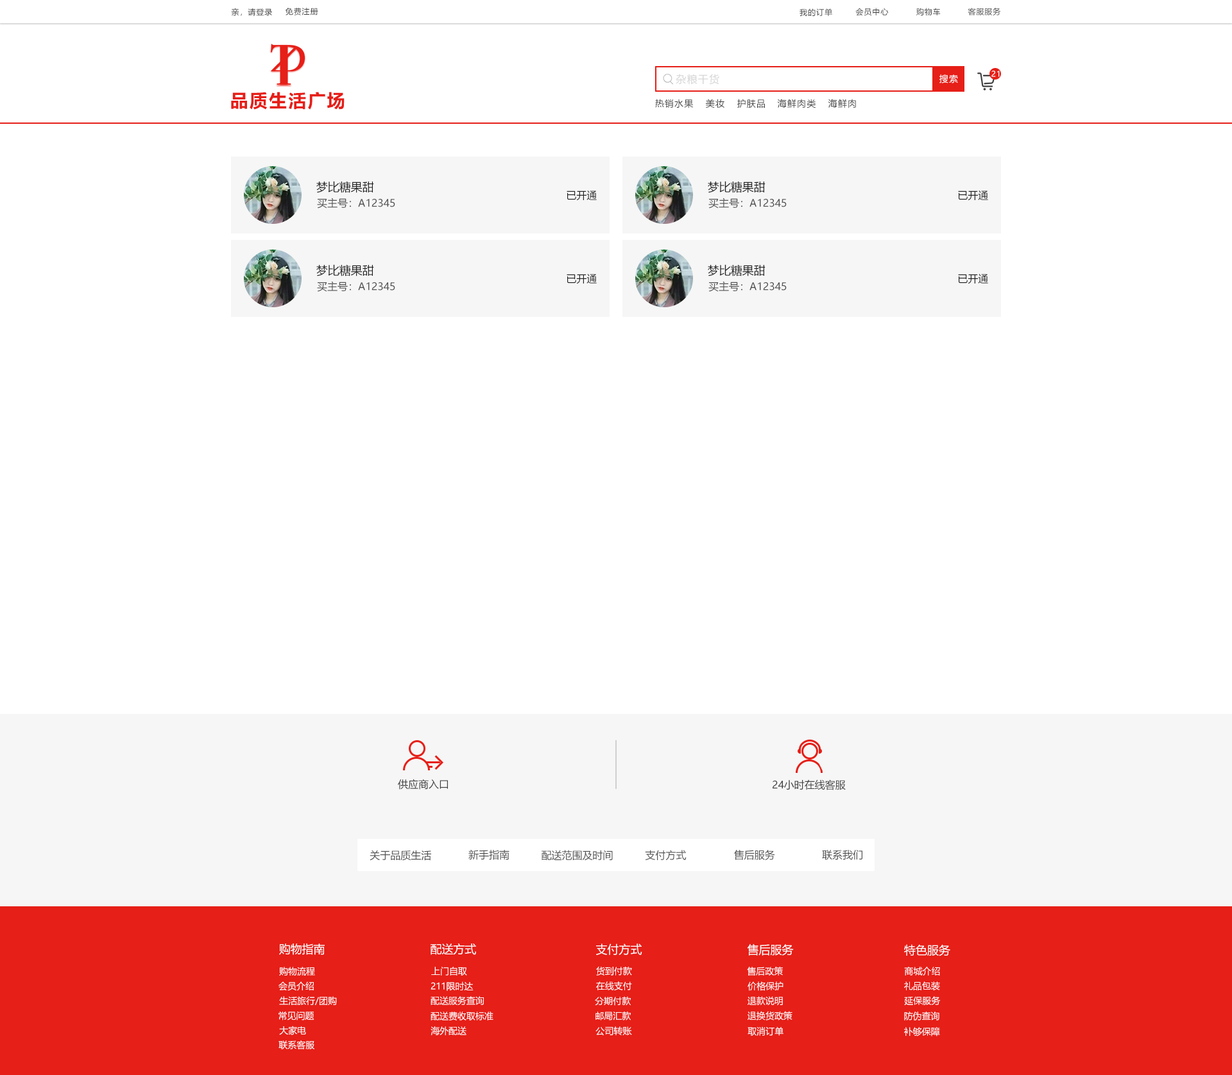
<style>
.page{position:relative;width:1232px;height:1075px;background:#ffffff}
.page>*{position:absolute;margin:0}
.t1{font:7.7px "MicrosoftYaHei";letter-spacing:0.08em;color:#404040}
.t2{font:10.3px "MicrosoftYaHei";letter-spacing:0.08em;color:#d6d6d6}
.t3{font:9px "MicrosoftYaHei";letter-spacing:0.08em;color:#ffffff}
.t4{font:7.7px "MicrosoftYaHei";letter-spacing:0.08em;color:#ffffff}
.t5{font:18px "MicrosoftYaHei-Bold";letter-spacing:0.08em;color:#e61f18}
.t6{font:9px "MicrosoftYaHei";letter-spacing:0.08em;color:#404040}
.t7{font:11.5px "MicrosoftYaHei";color:#202020}
.t8{font:10.3px "MicrosoftYaHei";color:#505050}
.t9{font:10.3px "MicrosoftYaHei";color:#202020}
.t10{font:10.3px "MicrosoftYaHei";color:#404040}
.t11{font:11.5px "MicrosoftYaHei";color:#ffffff}
.t12{font:9px "MicrosoftYaHei";color:#ffffff}
</style>
<div class="page">
<p class="t1" style="left:231px;top:8px;width:41px;height:8px">亲，请登录</p>
<p class="t1" style="left:285px;top:8px;width:33px;height:7px">免费注册</p>
<p class="t1" style="left:799px;top:8px;width:33px;height:8px">我的订单</p>
<p class="t1" style="left:855px;top:8px;width:34px;height:8px">会员中心</p>
<p class="t1" style="left:916px;top:8px;width:25px;height:8px">购物车</p>
<p class="t1" style="left:968px;top:8px;width:33px;height:7px">客服服务</p>
<p class="t2" style="left:676px;top:74px;width:43px;height:11px">杂粮干货</p>
<p class="t3" style="left:939px;top:74px;width:19px;height:9px">搜索</p>
<p class="t4" style="left:991px;top:71px;width:9px;height:6px">21</p>
<p class="t5" style="left:231px;top:92px;width:114px;height:18px">品质生活广场</p>
<p class="t6" style="left:655px;top:99px;width:39px;height:9px">热销水果</p>
<p class="t6" style="left:706px;top:99px;width:18px;height:9px">美妆</p>
<p class="t6" style="left:737px;top:99px;width:28px;height:9px">护肤品</p>
<p class="t6" style="left:777px;top:99px;width:39px;height:9px">海鲜肉类</p>
<p class="t6" style="left:828px;top:99px;width:28px;height:9px">海鲜肉</p>
<p class="t7" style="left:316px;top:181px;width:58px;height:12px">梦比糖果甜</p>
<p class="t7" style="left:708px;top:181px;width:57px;height:12px">梦比糖果甜</p>
<p class="t8" style="left:317px;top:198px;width:78px;height:11px">买主号：A12345</p>
<p class="t9" style="left:567px;top:191px;width:30px;height:10px">已开通</p>
<p class="t8" style="left:708px;top:198px;width:79px;height:11px">买主号：A12345</p>
<p class="t9" style="left:958px;top:191px;width:30px;height:10px">已开通</p>
<p class="t7" style="left:316px;top:264px;width:58px;height:13px">梦比糖果甜</p>
<p class="t7" style="left:708px;top:264px;width:57px;height:13px">梦比糖果甜</p>
<p class="t8" style="left:317px;top:281px;width:78px;height:11px">买主号：A12345</p>
<p class="t9" style="left:567px;top:274px;width:30px;height:10px">已开通</p>
<p class="t8" style="left:708px;top:281px;width:79px;height:11px">买主号：A12345</p>
<p class="t9" style="left:958px;top:274px;width:30px;height:10px">已开通</p>
<p class="t10" style="left:398px;top:779px;width:50px;height:11px">供应商入口</p>
<p class="t10" style="left:772px;top:780px;width:74px;height:10px">24小时在线客服</p>
<p class="t8" style="left:370px;top:850px;width:61px;height:11px">关于品质生活</p>
<p class="t8" style="left:468px;top:849px;width:41px;height:11px">新手指南</p>
<p class="t8" style="left:542px;top:850px;width:71px;height:11px">配送范围及时间</p>
<p class="t8" style="left:645px;top:850px;width:42px;height:10px">支付方式</p>
<p class="t8" style="left:734px;top:850px;width:41px;height:10px">售后服务</p>
<p class="t8" style="left:822px;top:850px;width:40px;height:10px">联系我们</p>
<p class="t11" style="left:279px;top:944px;width:46px;height:11px">购物指南</p>
<p class="t11" style="left:431px;top:944px;width:45px;height:11px">配送方式</p>
<p class="t11" style="left:596px;top:944px;width:46px;height:11px">支付方式</p>
<p class="t11" style="left:747px;top:944px;width:47px;height:12px">售后服务</p>
<p class="t11" style="left:904px;top:944px;width:46px;height:13px">特色服务</p>
<p class="t12" style="left:279px;top:967px;width:36px;height:9px">购物流程</p>
<p class="t12" style="left:431px;top:967px;width:36px;height:9px">上门自取</p>
<p class="t12" style="left:596px;top:967px;width:36px;height:9px">货到付款</p>
<p class="t12" style="left:747px;top:967px;width:36px;height:9px">售后政策</p>
<p class="t12" style="left:904px;top:967px;width:36px;height:9px">商城介绍</p>
<p class="t12" style="left:278px;top:982px;width:36px;height:9px">会员介绍</p>
<p class="t12" style="left:431px;top:982px;width:43px;height:9px">211限时达</p>
<p class="t12" style="left:596px;top:982px;width:36px;height:9px">在线支付</p>
<p class="t12" style="left:747px;top:982px;width:36px;height:9px">价格保护</p>
<p class="t12" style="left:904px;top:982px;width:36px;height:9px">礼品包装</p>
<p class="t12" style="left:279px;top:996px;width:58px;height:9px">生活旅行/团购</p>
<p class="t12" style="left:431px;top:996px;width:53px;height:9px">配送服务查询</p>
<p class="t12" style="left:595px;top:996px;width:36px;height:10px">分期付款</p>
<p class="t12" style="left:747px;top:996px;width:36px;height:10px">退款说明</p>
<p class="t12" style="left:904px;top:996px;width:37px;height:9px">延保服务</p>
<p class="t12" style="left:278px;top:1012px;width:36px;height:9px">常见问题</p>
<p class="t12" style="left:431px;top:1012px;width:62px;height:9px">配送费收取标准</p>
<p class="t12" style="left:595px;top:1012px;width:36px;height:9px">邮局汇款</p>
<p class="t12" style="left:747px;top:1011px;width:45px;height:10px">退换货政策</p>
<p class="t12" style="left:904px;top:1012px;width:35px;height:9px">防伪查询</p>
<p class="t12" style="left:279px;top:1026px;width:27px;height:10px">大家电</p>
<p class="t12" style="left:431px;top:1027px;width:35px;height:9px">海外配送</p>
<p class="t12" style="left:595px;top:1027px;width:37px;height:9px">公司转账</p>
<p class="t12" style="left:747px;top:1027px;width:36px;height:9px">取消订单</p>
<p class="t12" style="left:904px;top:1027px;width:36px;height:10px">补够保障</p>
<p class="t12" style="left:278px;top:1041px;width:36px;height:9px">联系客服</p>
</div>
